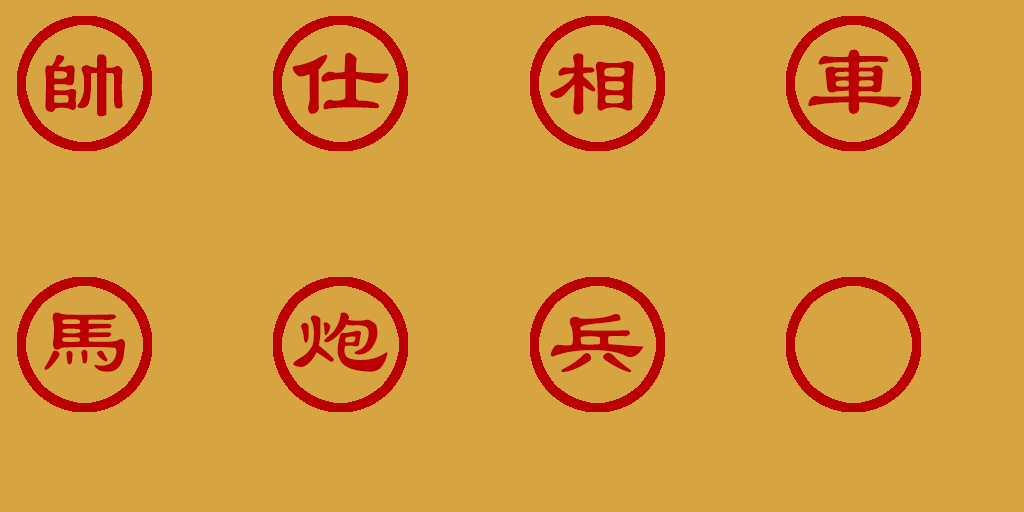
<style>
.page{position:relative;width:1024px;height:512px;background:#d6a440}
.page>*{position:absolute;margin:0}
.t1{font:99px "LiSu";color:#ba0000}
</style>
<div class="page">
<p class="t1" style="left:45px;top:54px;width:78px;height:63px">帥</p>
<p class="t1" style="left:292px;top:52px;width:97px;height:62px">仕</p>
<p class="t1" style="left:550px;top:53px;width:84px;height:62px">相</p>
<p class="t1" style="left:808px;top:49px;width:94px;height:65px">車</p>
<p class="t1" style="left:44px;top:312px;width:82px;height:60px">馬</p>
<p class="t1" style="left:293px;top:312px;width:95px;height:60px">炮</p>
<p class="t1" style="left:550px;top:314px;width:94px;height:58px">兵</p>
</div>
